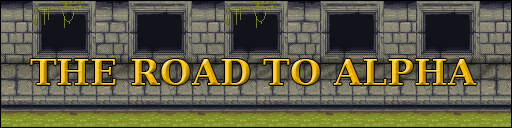
<style>
.page{position:relative;width:512px;height:128px}
.page>*{position:absolute;margin:0}
.t1{font:36px "BitstreamVeraSerif-Bold"}
</style>
<div class="page">
<p class="t1" style="left:30px;top:59px;width:447px;height:26px">THE ROAD TO ALPHA</p>
</div>
